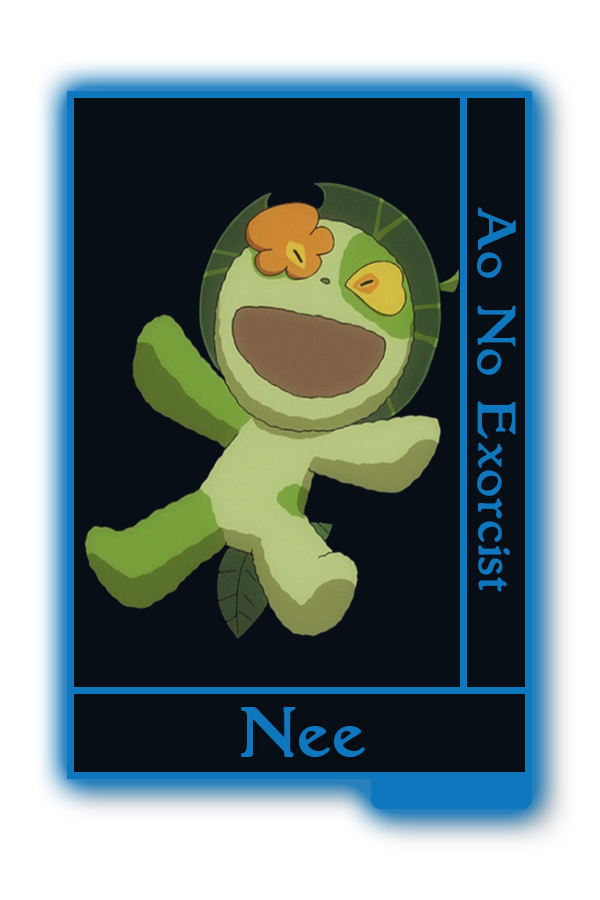
<style>
.page{position:relative;width:600px;height:900px;background:#070e16}
.page>*{position:absolute;margin:0}
.t1{font:48.8px "Grantham-Roman";color:#0f77be}
.t2{font:65.2px "Grantham-Roman";color:#0f77be}
</style>
<div class="page">
<p class="t1" style="left:477px;top:207px;width:39px;height:385px;rotate:90deg">Ao No Exorcist</p>
<p class="t2" style="left:241px;top:707px;width:124px;height:50px">Nee</p>
</div>
